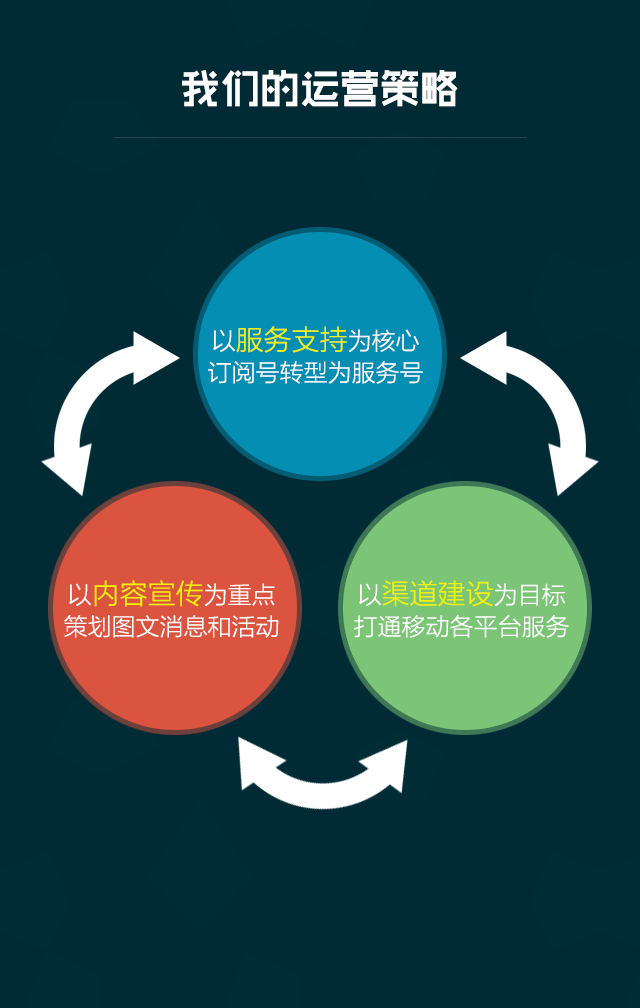
<style>
.page{position:relative;width:640px;height:1008px;background:#002b35}
.page>*{position:absolute;margin:0}
.t1{font:40px "RTWSShangGoG0v1-Bold";color:#ffffff}
.t2{font:24px/31.6px "FZLTKHK--GBK1-0";color:#ffffff}
.t3{font:28px/31.6px "FZLTKHK--GBK1-0";color:#f1f201}
</style>
<div class="page">
<p class="t1" style="left:182px;top:70px;width:276px;height:37px">我们的运营策略</p>
<p class="t2" style="left:208px;top:326px;width:215px;height:58px;text-align:center">以<span class="t3">服务支持</span>为核心<br>订阅号转型为服务号</p>
<p class="t2" style="left:64px;top:580px;width:215px;height:58px;text-align:center">以<span class="t3">内容宣传</span>为重点<br>策划图文消息和活动</p>
<p class="t2" style="left:354px;top:580px;width:215px;height:58px;text-align:center">以<span class="t3">渠道建设</span>为目标<br>打通移动各平台服务</p>
</div>
